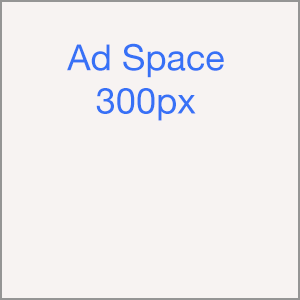
<style>
.page{position:relative;width:300px;height:300px;background:#f7f3f2}
.page>*{position:absolute;margin:0}
.t1{font:36px "HelveticaNeue";color:#3771f6}
</style>
<div class="page">
<p class="t1" style="left:67px;top:43px;width:157px;height:78px;text-align:center">Ad Space<br>300px</p>
</div>
